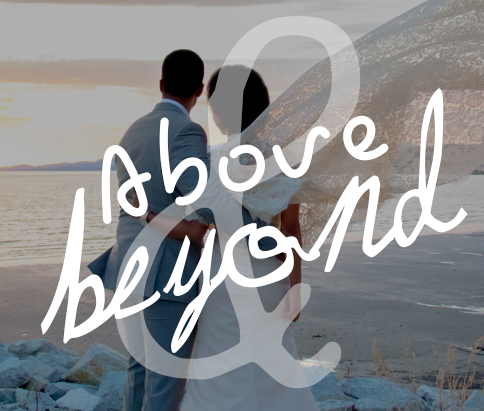
<style>
.page{position:relative;width:484px;height:411px}
.page>*{position:absolute;margin:0}
.t1{font:228.3px "MayQueen";color:#ffffff}
.t2{font:136.4px "Pecita";color:#ffffff}
</style>
<div class="page">
<p class="t1" style="left:40px;top:88px;width:428px;height:265px;rotate:-16deg">Beyond</p>
<p class="t2" style="left:101px;top:115px;width:288px;height:109px;rotate:-14deg">Above</p>
</div>
